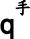
<style>
.page{position:relative;width:30px;height:39px;background:#ffffff}
.page>*{position:absolute;margin:0}
.t1{font:18px "DFKaiShu-SB-Estd-BF";color:#000000;font-weight:bold}
.t2{font:27px "ArialMT";color:#000000;font-weight:bold}
</style>
<div class="page">
<p class="t1" style="left:15px;top:0px;width:15px;height:16px">手</p>
<p class="t2" style="left:0px;top:18px;width:14px;height:22px">q</p>
</div>
